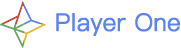
<style>
.page{position:relative;width:181px;height:48px;background:#ffffff}
.page>*{position:absolute;margin:0}
.t1{font:24px "PingFangSC-Light";color:#5c84f0;font-weight:bold}
</style>
<div class="page">
<p class="t1" style="left:56px;top:13px;width:124px;height:23px">Player One</p>
</div>
